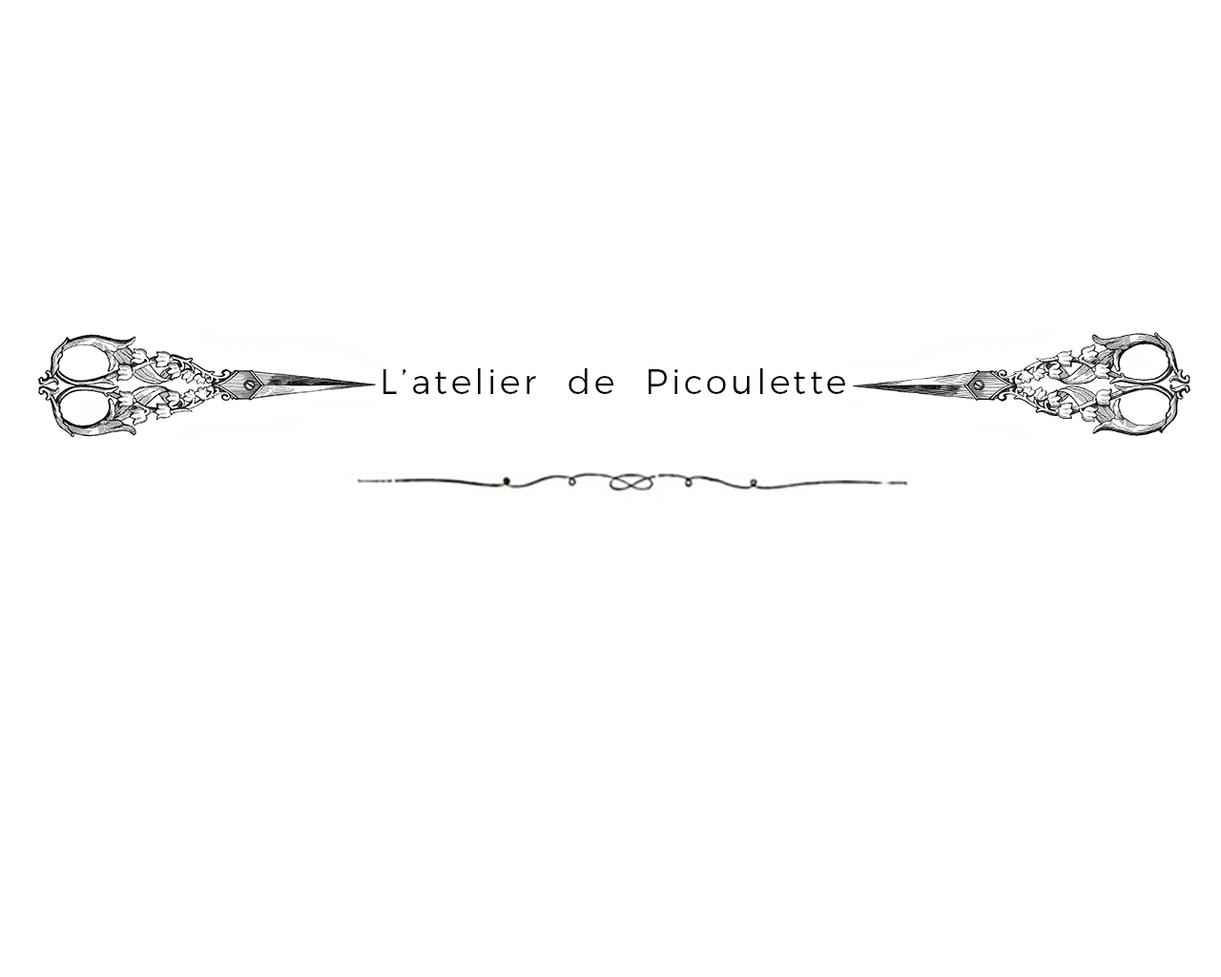
<style>
.page{position:relative;width:1221px;height:977px;background:#ffffff}
.page>*{position:absolute;margin:0}
.t1{font:34.3px "Montserrat-Light";letter-spacing:0.1em;color:#000000}
</style>
<div class="page">
<p class="t1" style="left:383px;top:368px;width:462px;height:26px">L’atelier  de  Picoulette</p>
</div>
